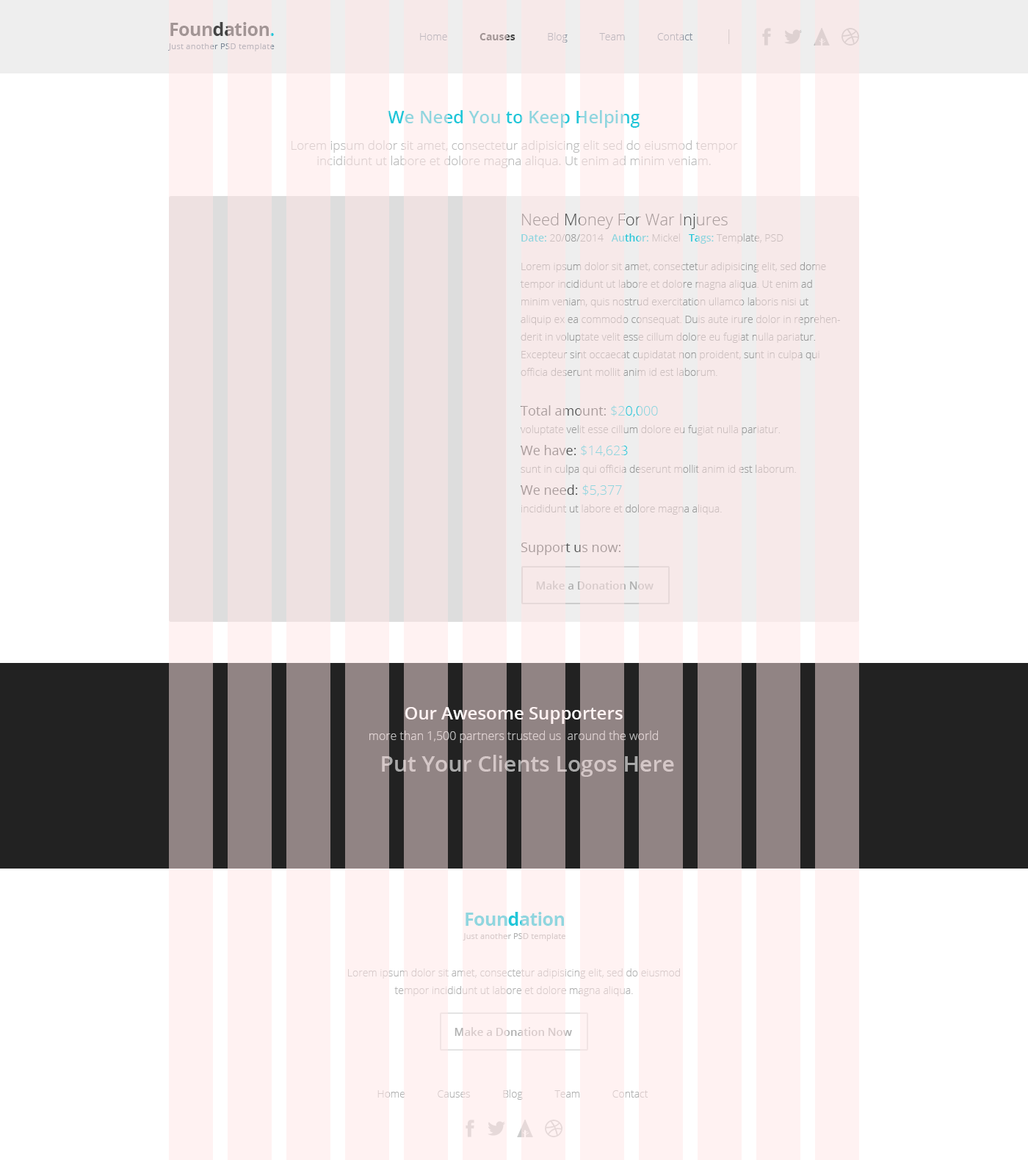
<style>
.page{position:relative;width:1028px;height:1160px;background:#ffffff}
.page>*{position:absolute;margin:0}
.t1{font:8.4px/13.2px "OpenSans";letter-spacing:0.015em;color:#a29595}
.t2{font:18.4px/22px "OpenSans-Bold";letter-spacing:-0.025em;color:#a29595}
.t3{font:10.3px "OpenSans-Light";color:#7e8a98}
.t4{font:10.3px "OpenSans-Bold";color:#444444}
.t5{font:14.7px "OpenSans-Light";color:#b0b0b0}
.t6{font:12.5px/26.4px "OpenSans-Light"}
.t7{font:17.6px "OpenSans-Semibold"}
.t8{font:12.5px/15.4px "OpenSans-Light"}
.t9{font:10.3px/17.6px "OpenSans-Light"}
.t10{font:16.2px "OpenSans-Light"}
.t11{font:10.3px/16.2px "OpenSans-Semibold"}
.t12{font:10.3px/16.2px "OpenSans-Light"}
.t13{font:10.3px/28.6px "OpenSans-Light"}
.t14{font:13.2px/22px "OpenSans"}
.t15{font:13.2px/22px "OpenSans-Light"}
.t16{font:11px "OpenSans-Semibold";color:#d8cbcb}
.t17{font:11.7px/21.1px "OpenSans-Light";color:#bbbbbb}
.t18{font:17.6px/21.1px "OpenSans-Semibold";color:#ffffff}
.t19{font:22px "OpenSans-Semibold";color:#d4c7c7}
.t20{font:8.1px/13.2px "OpenSans";letter-spacing:0.015em;color:#90d6df}
.t21{font:18.4px/22px "OpenSans-Bold";letter-spacing:-0.025em;color:#90d6df}
.t22{font:10.3px/17.6px "OpenSans-Light";color:#d8cbcb}
.t23{font:10.3px "OpenSans-Light"}
</style>
<div class="page">
<p class="t1" style="left:168px;top:22px;width:107px;height:29px"><span class="t2">Foundation</span><span class="t2">.<br></span>Just another PSD template</p>
<p class="t3" style="left:420px;top:29px;width:310px;height:15px">Home            <span class="t4">Causes            </span>Blog            Team            Contact            <span class="t5">|</span></p>
<p class="t6" style="left:291px;top:110px;width:447px;height:58px;text-align:center"><span class="t7">We Need You to Keep Helping<br></span>Lorem ipsum dolor sit amet, consectetur adipisicing elit sed do eiusmod tempor <span class="t8">incididunt ut labore et dolore magna aliqua. Ut enim ad minim veniam.</span></p>
<p class="t9" style="left:521px;top:213px;width:319px;height:342px"><span class="t10">Need Money For War Injures<br></span><span class="t11">Date: </span><span class="t12">20/08/2014   </span><span class="t11">Author:</span><span class="t12"> Mickel   </span><span class="t11">Tags:</span><span class="t12"> Template, PSD<br></span><span class="t13">Lorem ipsum dolor sit amet, consectetur adipisicing elit, sed dome </span>tempor incididunt ut labore et dolore magna aliqua. Ut enim ad minim veniam, quis nostrud exercitation ullamco laboris nisi ut aliquip ex ea commodo consequat. Duis aute irure dolor in reprehenderit in voluptate velit esse cillum dolore eu fugiat nulla pariatur. Excepteur sint occaecat cupidatat non proident, sunt in culpa qui officia deserunt mollit anim id est laborum.<br><br><span class="t14">Total amount: </span><span class="t15">$20,000<br></span>voluptate velit esse cillum dolore eu fugiat nulla pariatur.<br><span class="t14">We have: </span><span class="t15">$14,623<br></span>sunt in culpa qui officia deserunt mollit anim id est laborum.<br><span class="t14">We need: </span><span class="t15">$5,377<br></span>incididunt ut labore et dolore magna aliqua.<br><br><span class="t14">Support us now:</span></p>
<p class="t16" style="left:536px;top:581px;width:117px;height:9px">Make a Donation Now</p>
<p class="t17" style="left:369px;top:707px;width:289px;height:36px;text-align:center"><span class="t18">Our Awesome Supporters<br></span>more than 1,500 partners trusted us  around the world</p>
<p class="t19" style="left:382px;top:755px;width:292px;height:22px">Put Your Clients Logos Here</p>
<p class="t20" style="left:463px;top:912px;width:102px;height:29px;text-align:center"><span class="t21">Foundation<br></span>Just another PSD template</p>
<p class="t22" style="left:348px;top:968px;width:332px;height:28px;text-align:center">Lorem ipsum dolor sit amet, consectetur adipisicing elit, sed do eiusmod tempor incididunt ut labore et dolore magna aliqua.</p>
<p class="t16" style="left:454px;top:1027px;width:118px;height:9px">Make a Donation Now</p>
<p class="t23" style="left:377px;top:1090px;width:271px;height:10px">Home            Causes            Blog            Team            Contact</p>
</div>
